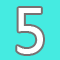
<style>
.page{position:relative;width:60px;height:60px;background:#45ebe1}
.page>*{position:absolute;margin:0}
.t1{font:60px "MicrosoftYaHei";color:#ffffff}
</style>
<div class="page">
<p class="t1" style="left:17px;top:8px;width:26px;height:46px">5</p>
</div>
